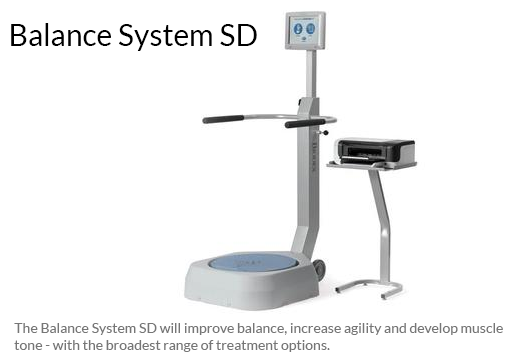
<style>
.page{position:relative;width:528px;height:360px;background:#ffffff}
.page>*{position:absolute;margin:0}
.t1{font:30px "Lato-Regular";color:#000000}
.t2{font:14px "Lato-Regular";color:#767676}
</style>
<div class="page">
<p class="t1" style="left:11px;top:23px;width:246px;height:28px">Balance System SD</p>
<p class="t2" style="left:14px;top:323px;width:489px;height:29px">The Balance System SD will improve balance, increase agility and develop muscle tone - with the broadest range of treatment options.</p>
</div>
